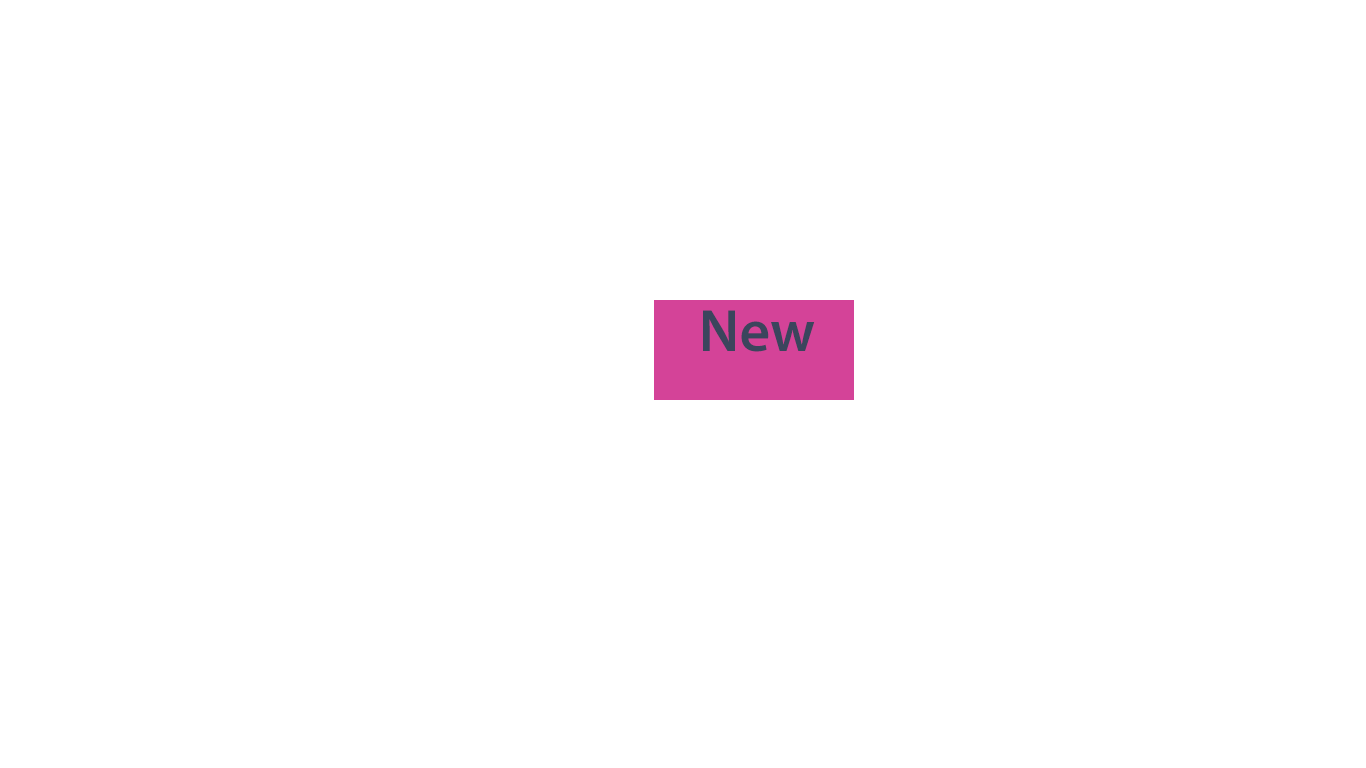
<style>
.page{position:relative;width:1366px;height:768px;background:#ffffff}
.page>*{position:absolute;margin:0}
.t1{font:60px "MyriadPro-Semibold";color:#3b455d}
</style>
<div class="page">
<p class="t1" style="left:703px;top:310px;width:112px;height:42px">New</p>
</div>
